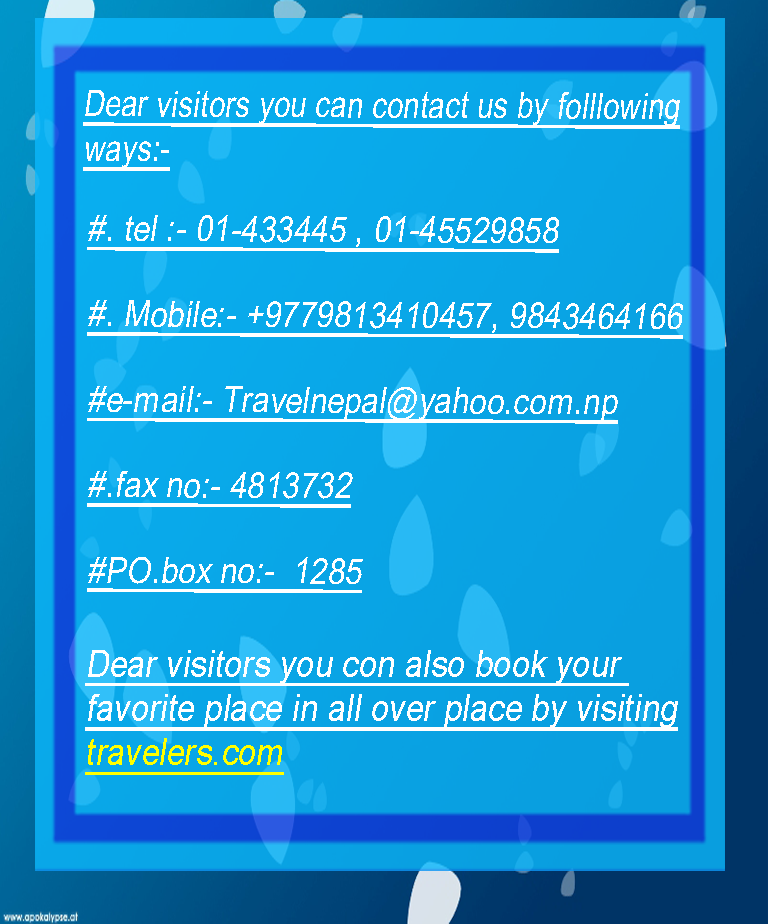
<style>
.page{position:relative;width:768px;height:924px}
.page>*{position:absolute;margin:0}
.t1{font:37.1px "ArialMT";color:#ffffff;font-style:italic;text-decoration:underline;scale:0.8 1}
.t2{font:35.6px "ArialMT";color:#ffffff;font-style:italic;text-decoration:underline;scale:0.88 1}
.t3{font:37.1px "ArialMT";color:#ffffff;font-style:italic;text-decoration:underline;scale:0.88 1}
.t4{font:37.1px "ArialMT";color:#ffff00;font-style:italic;text-decoration:underline;scale:0.88 1}
</style>
<div class="page">
<p class="t1" style="left:83px;top:90px;width:597px;height:81px">Dear visitors you can contact us by folllowing<br>ways:-</p>
<p class="t2" style="left:87px;top:215px;width:596px;height:378px">#. tel :- 01-433445 , 01-45529858<br><br>#. Mobile:- +9779813410457, 9843464166<br><br>#e-mail:- Travelnepal@yahoo.com.np<br><br>#.fax no:- 4813732<br><br>#PO.box no:-  1285</p>
<p class="t3" style="left:85px;top:650px;width:593px;height:125px">Dear visitors you con also book your <br>favorite place in all over place by visiting<br><span class="t4">travelers.com</span></p>
</div>
